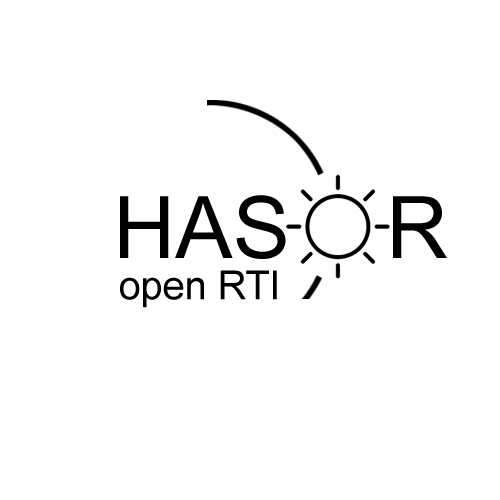
<style>
.page{position:relative;width:500px;height:500px;background:#ffffff}
.page>*{position:absolute;margin:0}
.t1{font:86.3px "ArialMT";color:#000000}
.t2{font:40px "ArialMT";color:#000000}
</style>
<div class="page">
<p class="t1" style="left:120px;top:195px;width:327px;height:64px">HAS    R</p>
<p class="t2" style="left:120px;top:270px;width:157px;height:38px">open RTI</p>
</div>
